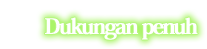
<style>
.page{position:relative;width:207px;height:49px;background:#ffffff}
.page>*{position:absolute;margin:0}
.t1{font:22px "HeiseiMinStd-W7";letter-spacing:-0.08em;color:#ffffff;font-weight:bold}
</style>
<div class="page">
<p class="t1" style="left:45px;top:17px;width:153px;height:23px">Dukungan penuh</p>
</div>
